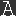
<style>
.page{position:relative;width:16px;height:16px;background:#333333}
.page>*{position:absolute;margin:0}
.t1{font:26.4px "CourierNewPSMT";color:#ffffff;scale:0.9 1}
</style>
<div class="page">
<p class="t1" style="left:1px;top:1px;width:14px;height:15px">A</p>
</div>
